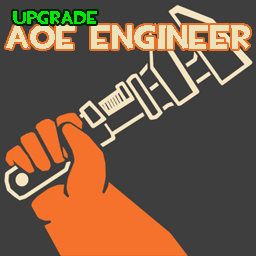
<style>
.page{position:relative;width:256px;height:256px;background:#3e3e3e}
.page>*{position:absolute;margin:0}
.t1{font:18px "TF2Build";color:#00e705}
.t2{font:34px "TF2Build";color:#ede3bb}
</style>
<div class="page">
<p class="t1" style="left:13px;top:11px;width:84px;height:13px">UPGRADE</p>
<p class="t2" style="left:6px;top:25px;width:244px;height:24px">AOE ENGINEER</p>
</div>
